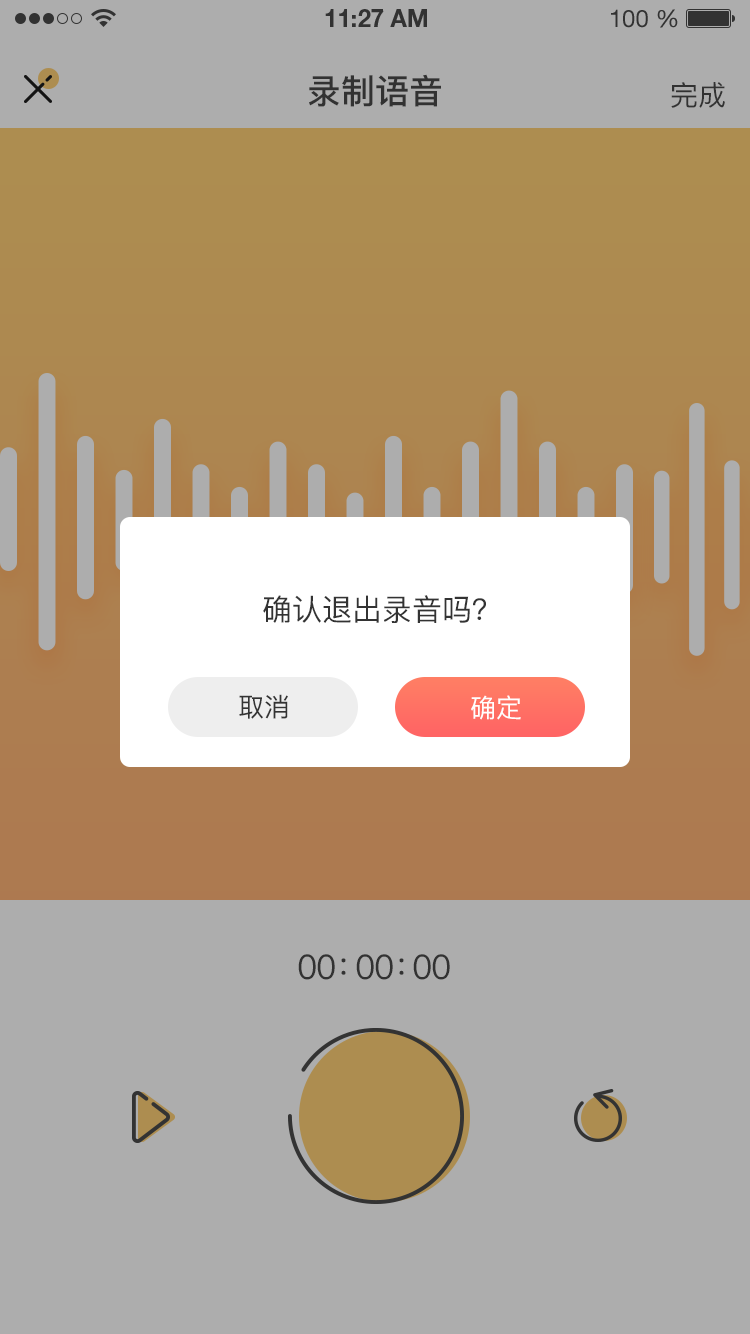
<style>
.page{position:relative;width:750px;height:1334px;background:#adadad}
.page>*{position:absolute;margin:0}
.t1{font:34px "PingFang-SC-Bold";color:#333333;text-transform:uppercase}
.t2{font:28px "PingFang-SC-Medium";color:#333333;text-transform:uppercase}
.t3{font:30px "PingFang-SC-Medium";color:#333333;text-transform:uppercase}
.t4{font:26px "PingFang-SC-Medium";color:#333333;text-transform:uppercase}
.t5{font:26px "PingFang-SC-Medium";color:#fffefe;text-transform:uppercase}
.t6{font:34px "PingFang-SC-Medium";letter-spacing:-0.04em;color:#333333;text-transform:uppercase}
.t7{font:34px "PingFang-SC-Medium";letter-spacing:-0.42em;color:#333333;text-transform:uppercase}
.t8{font:34px "PingFang-SC-Medium";letter-spacing:-0.44em;color:#333333;text-transform:uppercase}
</style>
<div class="page">
<p class="t1" style="left:309px;top:74px;width:132px;height:33px">录制语音</p>
<p class="t2" style="left:671px;top:82px;width:54px;height:26px">完成</p>
<p class="t3" style="left:263px;top:595px;width:223px;height:28px">确认退出录音吗？</p>
<p class="t4" style="left:239px;top:694px;width:49px;height:25px">取消</p>
<p class="t5" style="left:471px;top:695px;width:50px;height:25px">确定</p>
<p class="t6" style="left:298px;top:954px;width:152px;height:26px">00<span class="t7">：</span>00<span class="t8">：</span>00</p>
</div>
